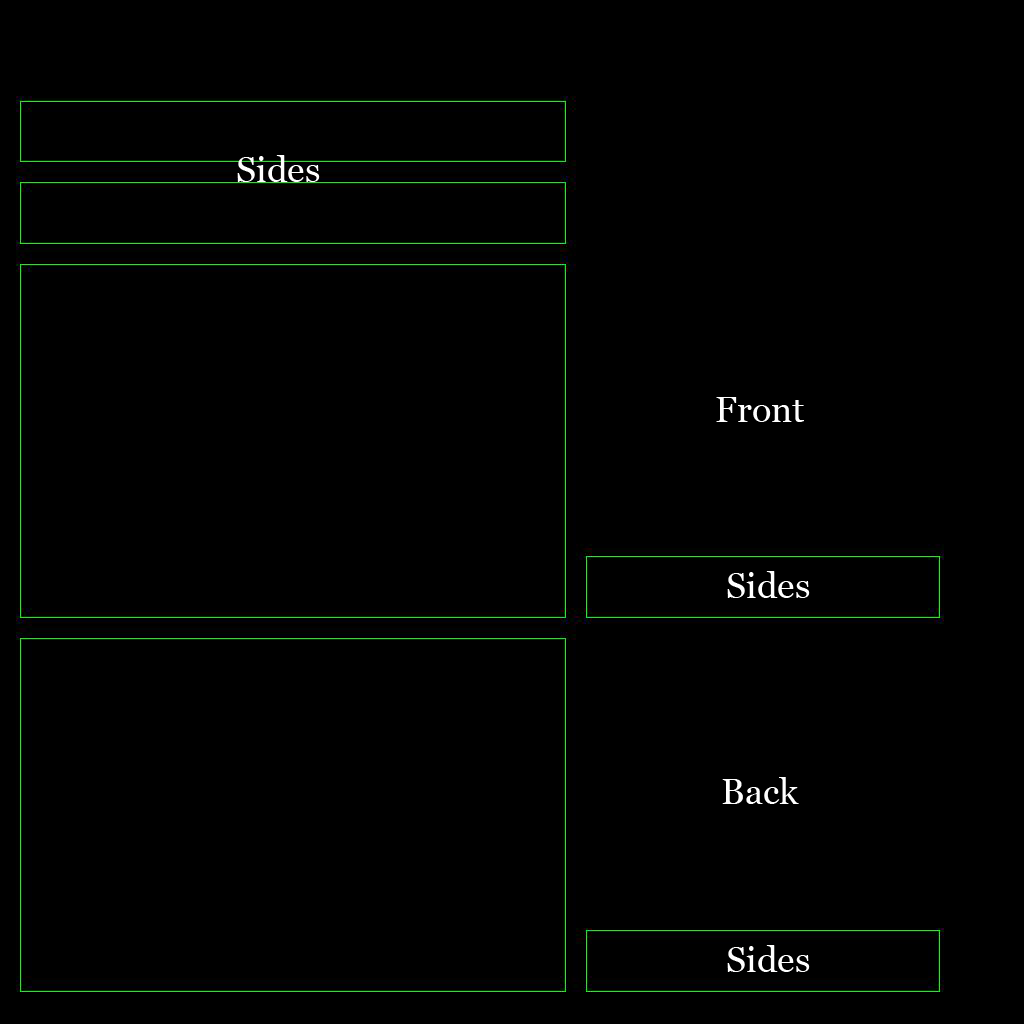
<style>
.page{position:relative;width:1024px;height:1024px;background:#000000}
.page>*{position:absolute;margin:0}
.t1{font:36px "Georgia";color:#ffffff}
</style>
<div class="page">
<p class="t1" style="left:237px;top:155px;width:83px;height:27px">Sides</p>
<p class="t1" style="left:716px;top:397px;width:88px;height:25px">Front</p>
<p class="t1" style="left:727px;top:571px;width:83px;height:27px">Sides</p>
<p class="t1" style="left:722px;top:777px;width:77px;height:27px">Back</p>
<p class="t1" style="left:727px;top:945px;width:83px;height:27px">Sides</p>
</div>
